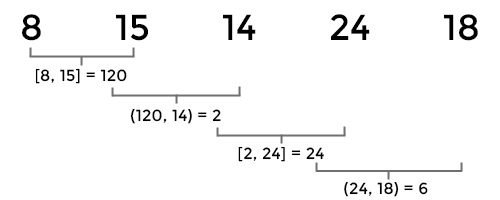
<style>
.page{position:relative;width:500px;height:200px;background:#ffffff}
.page>*{position:absolute;margin:0}
.t1{font:36px "Montserrat-Regular";letter-spacing:0.01em;color:#000000}
.t2{font:16px "Montserrat-Regular";letter-spacing:0.01em;color:#000000}
</style>
<div class="page">
<p class="t1" style="left:22px;top:14px;width:456px;height:27px">8       15       14       24       18</p>
<p class="t2" style="left:35px;top:68px;width:92px;height:16px">[8, 15] = 120</p>
<p class="t2" style="left:130px;top:108px;width:91px;height:16px">(120, 14) = 2</p>
<p class="t2" style="left:238px;top:146px;width:86px;height:16px">[2, 24] = 24</p>
<p class="t2" style="left:344px;top:181px;width:84px;height:16px">(24, 18) = 6</p>
</div>
